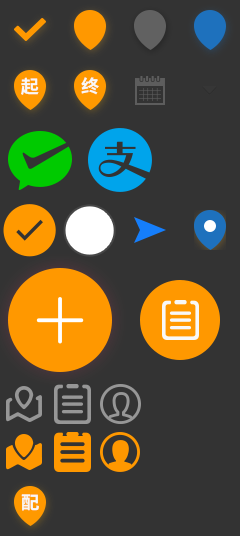
<style>
.page{position:relative;width:240px;height:536px;background:#333333}
.page>*{position:absolute;margin:0}
.t1{font:18px "NotoSansCJKsc-Bold";letter-spacing:0.01em;color:#f8f8f8}
</style>
<div class="page">
<p class="t1" style="left:21px;top:77px;width:18px;height:18px">起</p>
<p class="t1" style="left:81px;top:77px;width:18px;height:18px">终</p>
<p class="t1" style="left:21px;top:494px;width:18px;height:17px">配</p>
</div>
